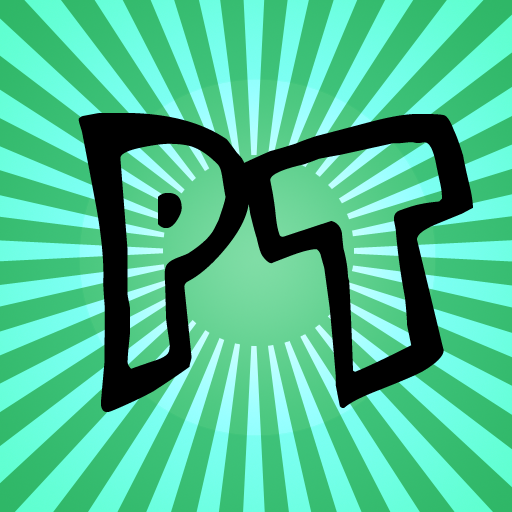
<style>
.page{position:relative;width:512px;height:512px}
.page>*{position:absolute;margin:0}
.t1{font:300px "IndigoJoker";color:#000000}
</style>
<div class="page">
<p class="t1" style="left:78px;top:113px;width:395px;height:299px">PT</p>
</div>
